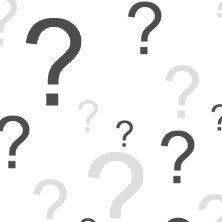
<style>
.page{position:relative;width:222px;height:222px;background:#ffffff}
.page>*{position:absolute;margin:0}
.t1{font:120px "ArialMT";color:#4d4d4d}
</style>
<div class="page">
<p class="t1" style="left:25px;top:18px;width:57px;height:88px">?</p>
</div>
